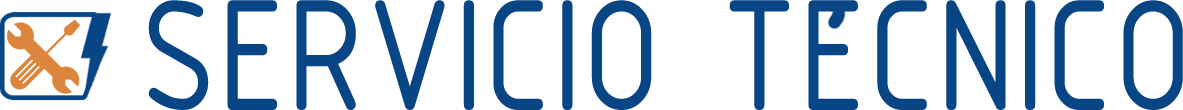
<style>
.page{position:relative;width:1183px;height:110px;background:#ffffff}
.page>*{position:absolute;margin:0}
.t1{font:169.7px "ISOCPEUR";color:#074585;scale:0.9 1}
</style>
<div class="page">
<p class="t1" style="left:148px;top:0px;width:1035px;height:110px">SERVICIO TECNICO</p>
</div>
